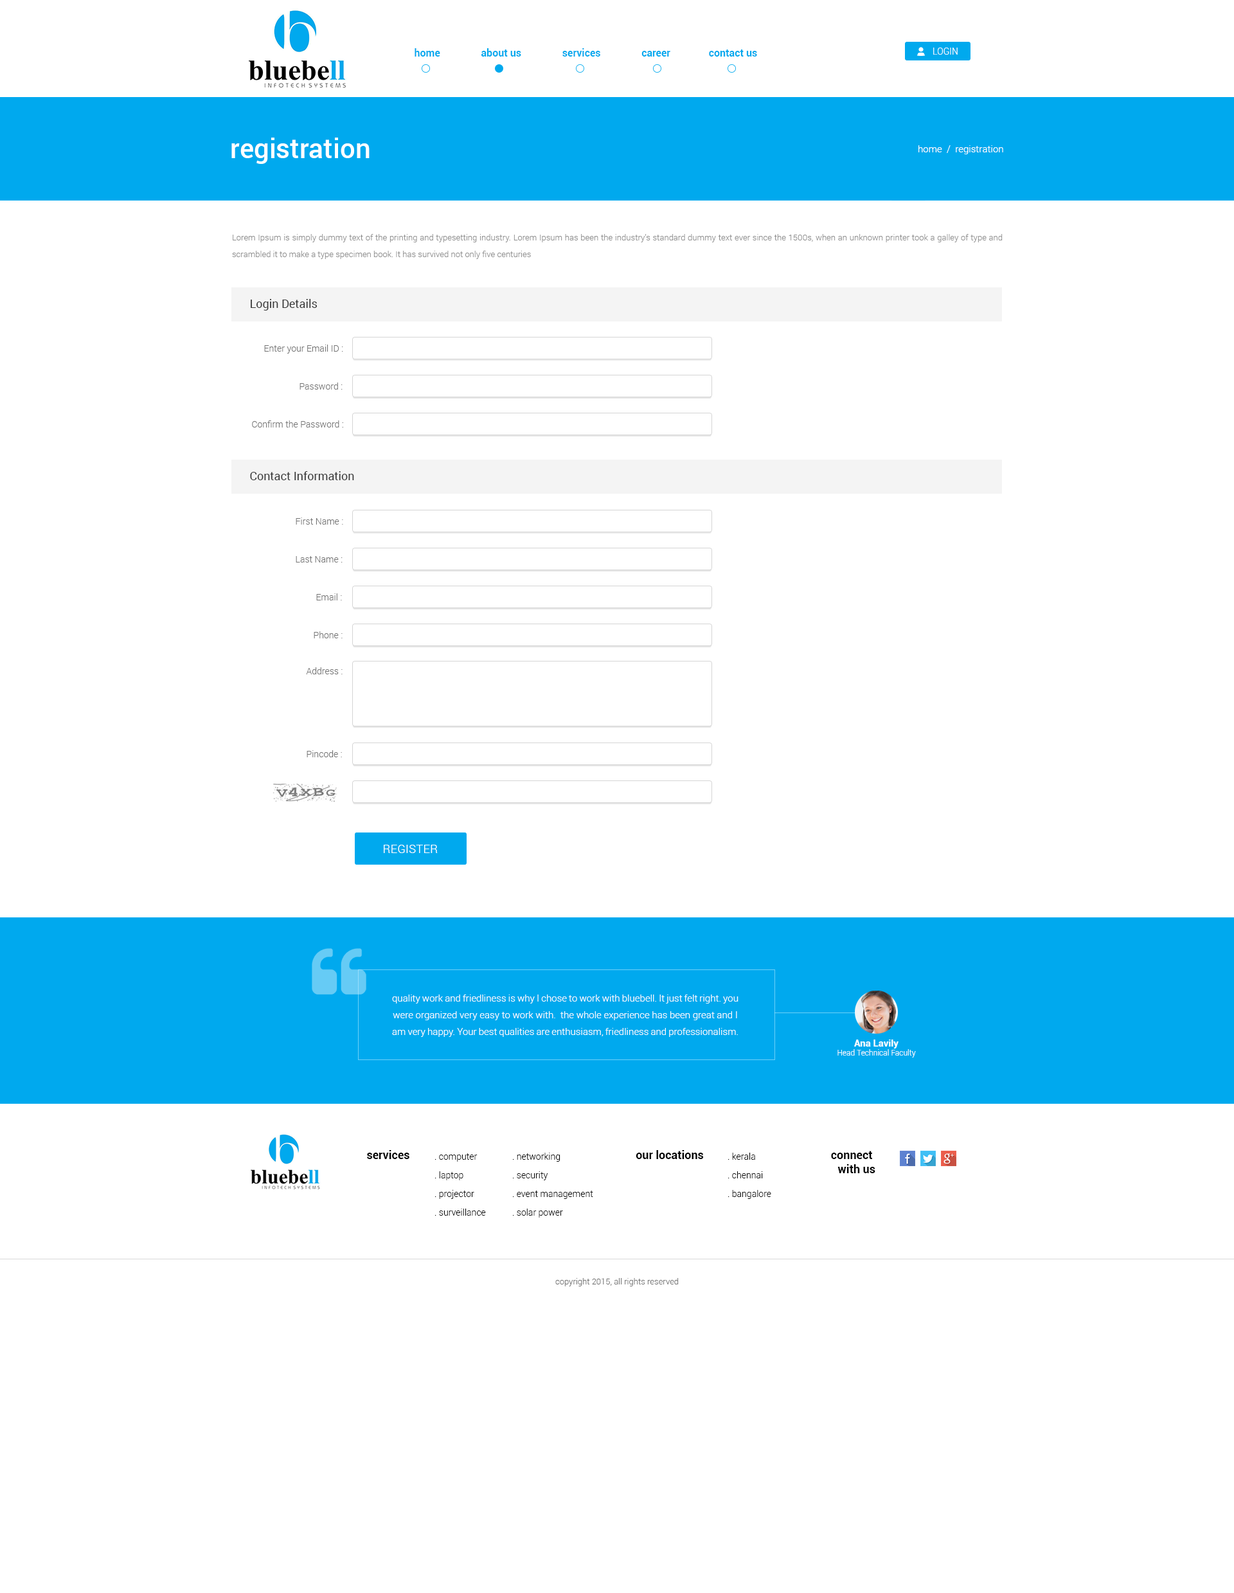
<style>
.page{position:relative;width:1234px;height:1593px;background:#ffffff}
.page>*{position:absolute;margin:0}
.t1{font:10.3px "Roboto-Bold";color:#00a9ee}
.t2{font:9px "Roboto-Light";color:#ffffff}
.t3{font:27px "Roboto-Medium";color:#ffffff}
.t4{font:9.6px "Roboto-Light";color:#ffffff}
.t5{font:8.4px/16.7px "Roboto-Light";color:#8f8f8f}
.t6{font:11.6px "Roboto-Regular";color:#383838}
.t7{font:9px "Roboto-Light";color:#747474}
.t8{font:11.6px "Roboto-Light";letter-spacing:0.02em;color:#ffffff}
.t9{font:9.6px/16.7px "Roboto-Light";color:#ffffff}
.t10{font:7.7px/10.9px "Roboto-Light";color:#ffffff}
.t11{font:9.6px/10.9px "Roboto-Bold";color:#ffffff}
.t12{font:11.6px "Roboto-Bold";color:#000000}
.t13{font:9px/18.6px "Roboto-Light";color:#000000}
.t14{font:11.6px/14.1px "Roboto-Bold";color:#000000}
.t15{font:8.4px "Roboto-Light";color:#6c6c6c}
</style>
<div class="page">
<p class="t1" style="left:415px;top:48px;width:342px;height:9px">home                about us                services                career               contact us</p>
<p class="t2" style="left:933px;top:48px;width:25px;height:7px">LOGIN</p>
<p class="t3" style="left:231px;top:138px;width:139px;height:26px">registration</p>
<p class="t4" style="left:919px;top:145px;width:85px;height:9px">home  /  registration</p>
<p class="t5" style="left:232px;top:234px;width:771px;height:25px;text-align:justify">Lorem Ipsum is simply dummy text of the printing and typesetting industry. Lorem Ipsum has been the industry's standard dummy text ever since the 1500s, when an unknown printer took a galley of type and scrambled it to make a type specimen book. It has survived not only five centuries</p>
<p class="t6" style="left:251px;top:299px;width:67px;height:11px">Login Details</p>
<p class="t7" style="left:264px;top:345px;width:79px;height:9px">Enter your Email ID :</p>
<p class="t7" style="left:300px;top:382px;width:43px;height:8px">Password :</p>
<p class="t7" style="left:252px;top:420px;width:91px;height:8px">Confirm the Password :</p>
<p class="t6" style="left:250px;top:471px;width:104px;height:9px">Contact Information</p>
<p class="t7" style="left:296px;top:518px;width:47px;height:7px">First Name :</p>
<p class="t7" style="left:296px;top:556px;width:47px;height:6px">Last Name :</p>
<p class="t7" style="left:316px;top:593px;width:26px;height:7px">Email :</p>
<p class="t7" style="left:314px;top:631px;width:29px;height:7px">Phone :</p>
<p class="t7" style="left:306px;top:667px;width:37px;height:7px">Address :</p>
<p class="t7" style="left:307px;top:750px;width:35px;height:7px">Pincode :</p>
<p class="t8" style="left:384px;top:845px;width:54px;height:8px">REGISTER</p>
<p class="t9" style="left:392px;top:995px;width:347px;height:42px;text-align:center">quality work and friedliness is why I chose to work with bluebell. It just felt right. you were organized very easy to work with.  the whole experience has been great and I am very happy. Your best qualities are enthusiasm, friedliness and professionalism.</p>
<p class="t10" style="left:838px;top:1040px;width:78px;height:18px;text-align:center"><span class="t11">Ana Lavily<br></span>Head Technical Faculty</p>
<p class="t12" style="left:367px;top:1150px;width:43px;height:9px">services</p>
<p class="t13" style="left:435px;top:1153px;width:51px;height:63px">. computer<br>. laptop<br>. projector<br>. surveillance</p>
<p class="t13" style="left:513px;top:1153px;width:80px;height:65px">. networking<br>. security<br>. event management<br>. solar power</p>
<p class="t12" style="left:636px;top:1150px;width:68px;height:9px">our locations</p>
<p class="t13" style="left:728px;top:1153px;width:43px;height:46px">. kerala<br>. chennai<br>. bangalore</p>
<p class="t14" style="left:831px;top:1151px;width:45px;height:22px;text-align:right">connect <br>with us</p>
<p class="t15" style="left:555px;top:1278px;width:124px;height:8px">copyright 2015, all rights reserved</p>
</div>
